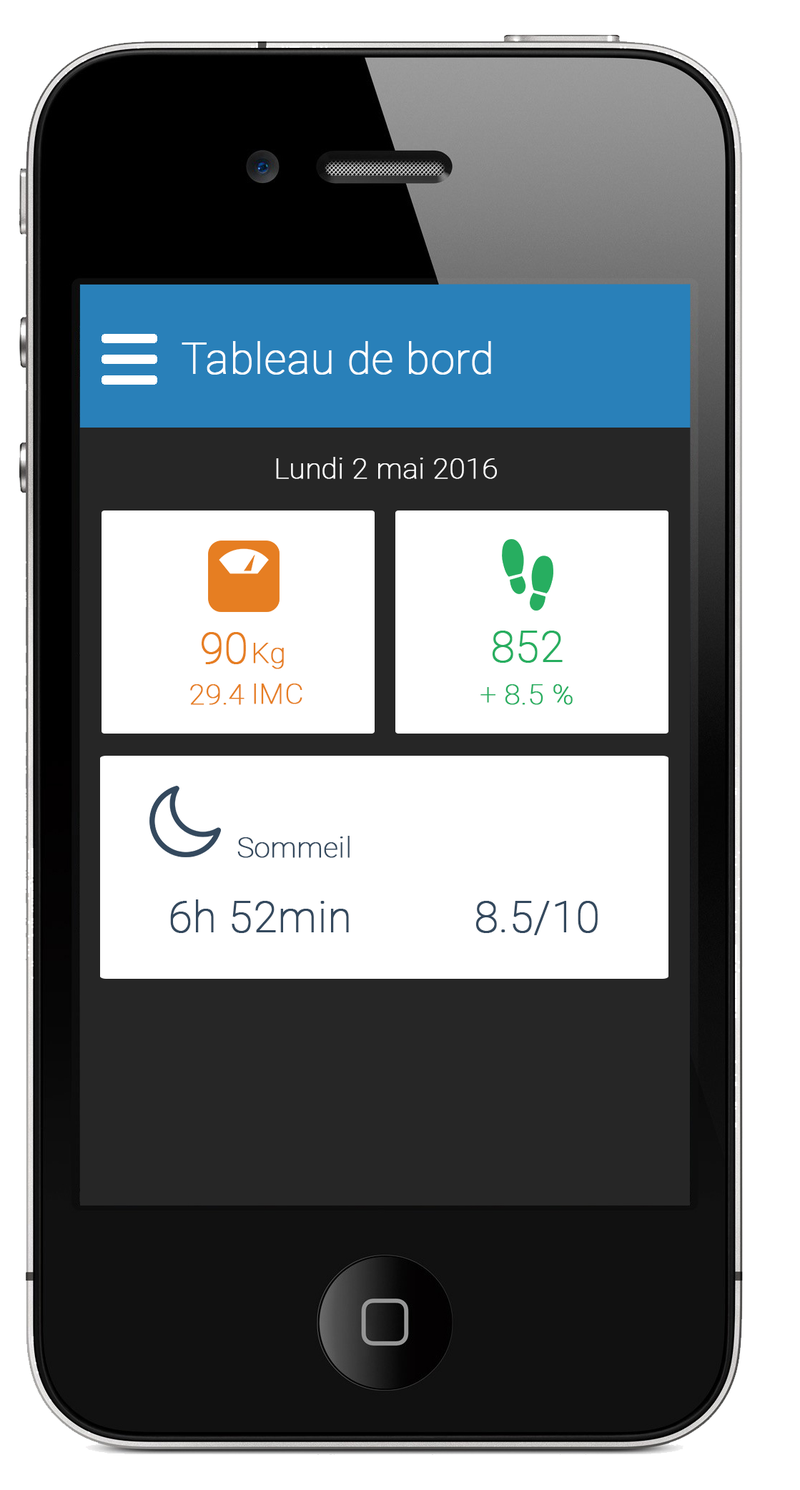
<style>
.page{position:relative;width:800px;height:1490px;background:#ffffff}
.page>*{position:absolute;margin:0}
.t1{font:42.9px "Roboto-Thin";color:#ffffff;font-weight:bold}
.t2{font:28.6px "Roboto-Thin";color:#ffffff;font-weight:bold}
.t3{font:42.9px "Roboto-Thin";color:#e67e22;font-weight:bold}
.t4{font:42.9px "Roboto-Thin";color:#27ae60;font-weight:bold}
.t5{font:28.6px "Roboto-Thin";color:#e67e22;font-weight:bold}
.t6{font:28.6px "Roboto-Thin";color:#27ae60;font-weight:bold}
.t7{font:28.6px "Roboto-Thin";color:#34495e;font-weight:bold}
.t8{font:42.9px "Roboto-Thin";color:#34495e;font-weight:bold}
</style>
<div class="page">
<p class="t1" style="left:182px;top:341px;width:309px;height:34px">Tableau de bord</p>
<p class="t2" style="left:276px;top:457px;width:221px;height:22px">Lundi 2 mai 2016</p>
<p class="t3" style="left:202px;top:632px;width:44px;height:32px">90</p>
<p class="t4" style="left:492px;top:631px;width:71px;height:32px">852</p>
<p class="t5" style="left:253px;top:643px;width:31px;height:26px">Kg</p>
<p class="t5" style="left:190px;top:684px;width:55px;height:21px">29.4</p>
<p class="t5" style="left:254px;top:684px;width:48px;height:20px">IMC</p>
<p class="t6" style="left:481px;top:684px;width:92px;height:21px">+ 8.5 %</p>
<p class="t7" style="left:237px;top:836px;width:113px;height:22px">Sommeil</p>
<p class="t8" style="left:170px;top:900px;width:179px;height:33px">6h 52min</p>
<p class="t8" style="left:476px;top:901px;width:122px;height:34px">8.5/10</p>
</div>
